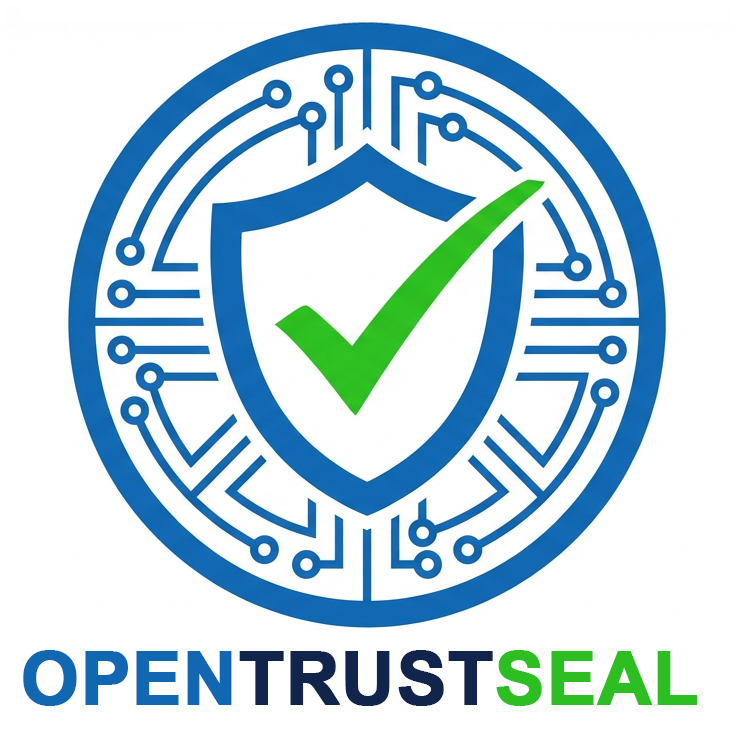
<style>
.page{position:relative;width:734px;height:733px;background:#ffffff}
.page>*{position:absolute;margin:0}
.t1{font:74px "Arial-BoldMT";color:#10244c;font-weight:bold}
.t2{font:74px "Arial-BoldMT";color:#1167b1;font-weight:bold}
.t3{font:74px "Arial-BoldMT";color:#2dbe22;font-weight:bold}
</style>
<div class="page">
<p class="t1" style="left:23px;top:650px;width:674px;height:56px"><span class="t2">OPEN</span>TRUST<span class="t3">SEAL</span></p>
</div>
